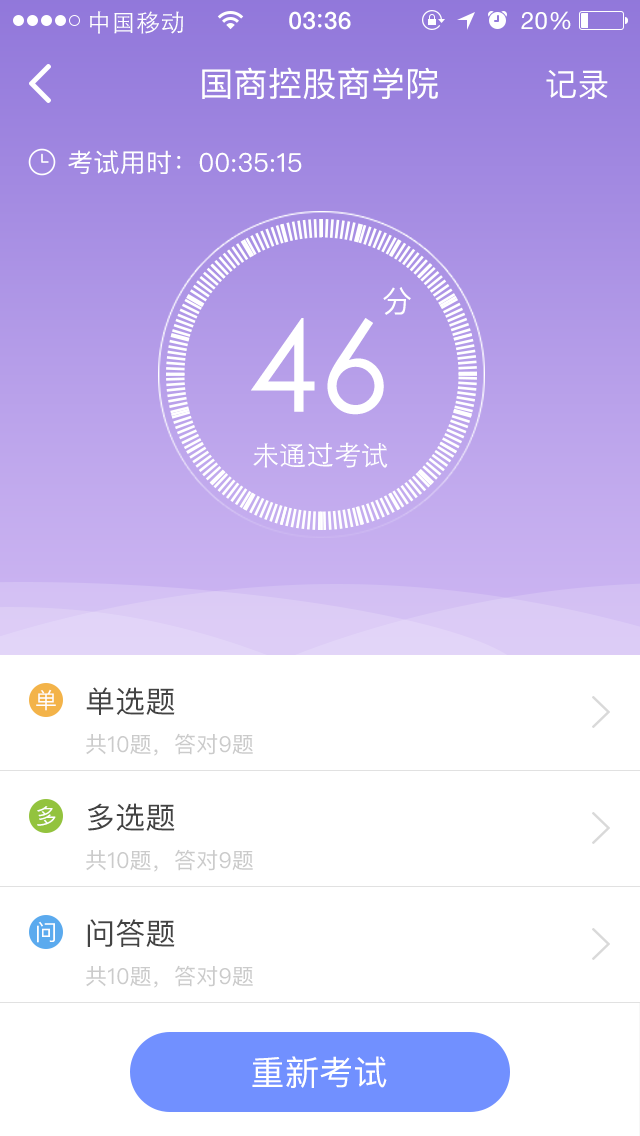
<style>
.page{position:relative;width:640px;height:1136px;background:#ffffff}
.page>*{position:absolute;margin:0}
.t1{font:24px "STHeitiSC-Light";letter-spacing:0.02em;color:#ffffff}
.t2{font:24px "HelveticaNeue-Medium";letter-spacing:0.03em;color:#ffffff}
.t3{font:24px "HelveticaNeue";letter-spacing:0.02em;color:#ffffff}
.t4{font:34px "PingFangSC-Regular";letter-spacing:0.01em;color:#ffffff}
.t5{font:32px "PingFangSC-Regular";letter-spacing:0.01em;color:#ffffff}
.t6{font:26px "PingFangSC-Regular";letter-spacing:0.01em;color:#ffffff}
.t7{font:30.6px "PingFangSC-Regular";letter-spacing:0.01em;color:#ffffff}
.t8{font:127.1px "STHeitiSC-Light";letter-spacing:0.01em;color:#ffffff}
.t9{font:27.3px "STHeitiSC-Light";letter-spacing:0.01em;color:#ffffff}
.t10{font:22px "PingFangSC-Regular";letter-spacing:0.01em;color:#ffffff}
.t11{font:30px "PingFangSC-Regular";letter-spacing:0.01em;color:#434343}
.t12{font:22px "PingFangSC-Regular";letter-spacing:0.01em;color:#cbcbcb}
</style>
<div class="page">
<p class="t1" style="left:90px;top:11px;width:93px;height:23px">中国移动</p>
<p class="t2" style="left:289px;top:11px;width:62px;height:19px">03 36</p>
<p class="t3" style="left:521px;top:11px;width:50px;height:19px">20%</p>
<p class="t4" style="left:202px;top:67px;width:236px;height:33px">国商控股商学院</p>
<p class="t5" style="left:546px;top:70px;width:62px;height:29px">记录</p>
<p class="t6" style="left:68px;top:150px;width:234px;height:24px">考试用时：00:35:15</p>
<p class="t7" style="left:383px;top:287px;width:28px;height:28px">分</p>
<p class="t8" style="left:251px;top:318px;width:133px;height:97px">46</p>
<p class="t9" style="left:253px;top:442px;width:135px;height:26px">未通过考试</p>
<p class="t10" style="left:36px;top:689px;width:20px;height:22px">单</p>
<p class="t11" style="left:86px;top:687px;width:89px;height:28px">单选题</p>
<p class="t12" style="left:86px;top:733px;width:167px;height:23px">共10题，答对9题</p>
<p class="t10" style="left:37px;top:806px;width:19px;height:20px">多</p>
<p class="t11" style="left:88px;top:803px;width:87px;height:28px">多选题</p>
<p class="t12" style="left:86px;top:849px;width:167px;height:23px">共10题，答对9题</p>
<p class="t10" style="left:37px;top:921px;width:18px;height:22px">问</p>
<p class="t11" style="left:87px;top:919px;width:88px;height:28px">问答题</p>
<p class="t12" style="left:86px;top:965px;width:167px;height:23px">共10题，答对9题</p>
<p class="t4" style="left:252px;top:1056px;width:135px;height:32px">重新考试</p>
</div>
